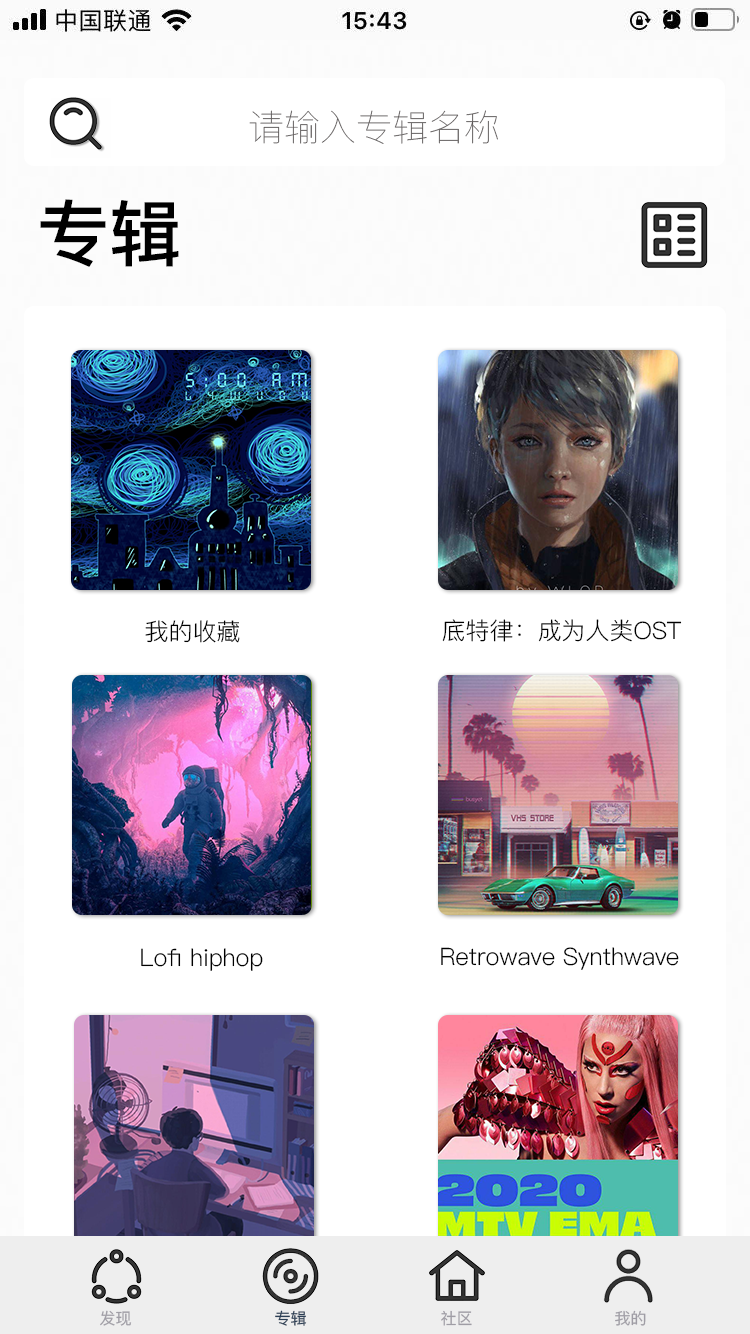
<style>
.page{position:relative;width:750px;height:1334px;background:#ffffff}
.page>*{position:absolute;margin:0}
.t1{font:36px "PingFang-SC-ExtraLight";color:#575252}
.t2{font:72px "PingFang-SC-Bold";color:#000000}
.t3{font:24px "PingFang-SC-Regular";color:#000000}
.t4{font:16px "PingFang-SC-Medium";color:#9f9da5}
.t5{font:16px "PingFang-SC-Medium";color:#2a3e55}
</style>
<div class="page">
<p class="t1" style="left:249px;top:110px;width:249px;height:34px">请输入专辑名称</p>
<p class="t2" style="left:40px;top:199px;width:139px;height:68px">专辑</p>
<p class="t3" style="left:145px;top:620px;width:95px;height:23px">我的收藏</p>
<p class="t3" style="left:442px;top:619px;width:240px;height:23px">底特律：成为人类OST</p>
<p class="t3" style="left:141px;top:948px;width:122px;height:23px">Lofi hiphop</p>
<p class="t3" style="left:441px;top:947px;width:238px;height:23px">Retrowave Synthwave</p>
<p class="t4" style="left:100px;top:1310px;width:32px;height:16px">发现</p>
<p class="t5" style="left:275px;top:1310px;width:32px;height:16px">专辑</p>
<p class="t4" style="left:441px;top:1310px;width:31px;height:16px">社区</p>
<p class="t4" style="left:615px;top:1310px;width:31px;height:16px">我的</p>
</div>
